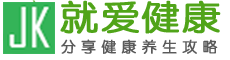
<style>
.page{position:relative;width:230px;height:60px;background:#ffffff}
.page>*{position:absolute;margin:0}
.t1{font:33.6px "STYuanti-SC-Regular";letter-spacing:0.05em;color:#49a010;font-weight:bold;scale:1.13 1}
.t2{font:14.4px "STYuanti-SC-Regular";letter-spacing:0.05em;color:#5a5a5a;font-weight:bold}
</style>
<div class="page">
<p class="t1" style="left:60px;top:0px;width:161px;height:34px;opacity:0.96">就爱健康</p>
<p class="t2" style="left:61px;top:39px;width:157px;height:15px">分 享 健 康 养 生 攻 略</p>
</div>
